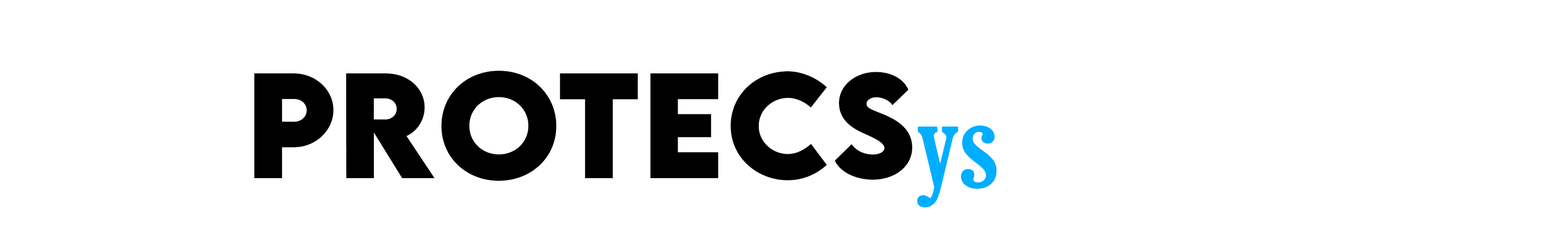
<style>
.page{position:relative;width:1568px;height:251px;background:#ffffff}
.page>*{position:absolute;margin:0}
.t1{font:132.7px "LEMONMILK-Bold";letter-spacing:0.01em;color:#000000}
.t2{font:132.7px "GloucesterMT-ExtraCondensed";letter-spacing:0.01em;color:#00aeff}
</style>
<div class="page">
<p class="t1" style="left:254px;top:70px;width:658px;height:111px">Protecs</p>
<p class="t2" style="left:917px;top:125px;width:80px;height:82px">ys</p>
</div>
